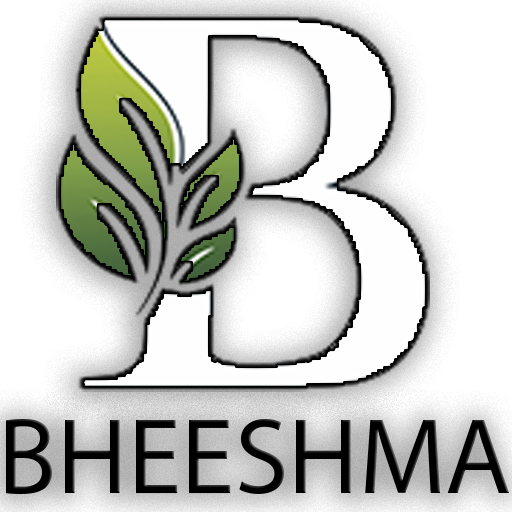
<style>
.page{position:relative;width:512px;height:512px;background:#ffffff}
.page>*{position:absolute;margin:0}
.t1{font:108.6px "MyriadPro-Regular";color:#000000}
</style>
<div class="page">
<p class="t1" style="left:6px;top:419px;width:503px;height:75px">BHEESHMA</p>
</div>
